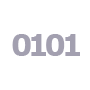
<style>
.page{position:relative;width:90px;height:90px;background:#ffffff}
.page>*{position:absolute;margin:0}
.t1{font:30px "Verdana-Bold";letter-spacing:-0.15em;color:#a3a0b0}
</style>
<div class="page">
<p class="t1" style="left:12px;top:34px;width:68px;height:22px">0101</p>
</div>
